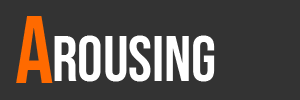
<style>
.page{position:relative;width:300px;height:100px;background:#333333}
.page>*{position:absolute;margin:0}
.t1{font:96.5px "BebasNeue-Regular";letter-spacing:-0.025em;color:#ff6a00}
.t2{font:64px "BebasNeue-Regular";letter-spacing:-0.005em;color:#ffffff}
</style>
<div class="page">
<p class="t1" style="left:16px;top:16px;width:37px;height:67px">A</p>
<p class="t2" style="left:54px;top:35px;width:161px;height:47px">rousing</p>
</div>
